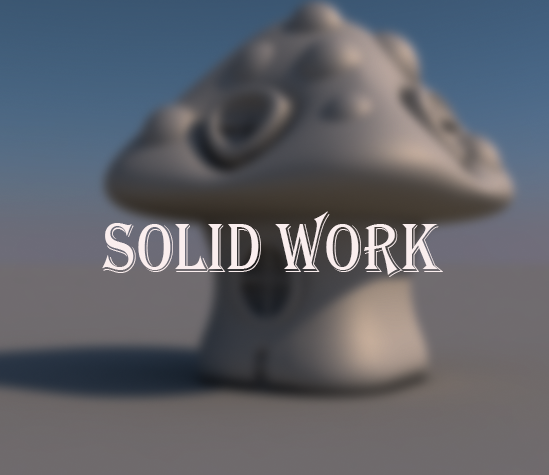
<style>
.page{position:relative;width:549px;height:475px}
.page>*{position:absolute;margin:0}
.t1{font:71.6px "Algerian";color:#faeeee;scale:0.84 1}
</style>
<div class="page">
<p class="t1" style="left:102px;top:211px;width:341px;height:66px">solid work</p>
</div>
